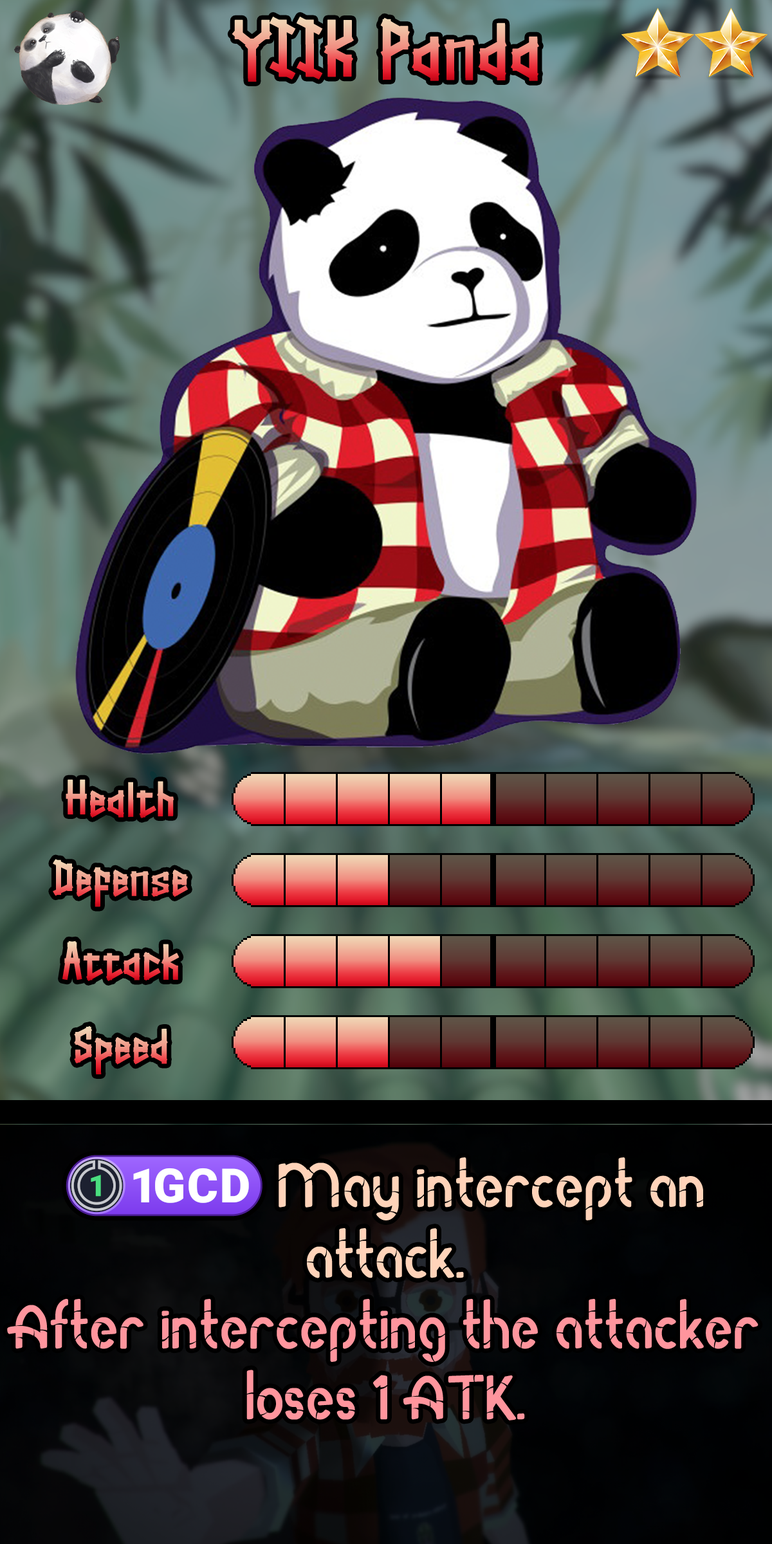
<style>
.page{position:relative;width:772px;height:1544px}
.page>*{position:absolute;margin:0}
.t1{font:152.5px "Straightwell"}
.t2{font:92.7px "Straightwell"}
.t3{font:106.8px/70.8px "RodaBamboo";color:#ff959d}
.t4{font:106.8px/70.8px "stoogedings-Regular";color:#ffd3b9}
.t5{font:106.8px/70.8px "RodaBamboo";color:#ffd3b9}
</style>
<div class="page">
<p class="t1" style="left:232px;top:16px;width:307px;height:66px">YIIK Panda</p>
<p class="t2" style="left:66px;top:779px;width:108px;height:39px">Health</p>
<p class="t2" style="left:53px;top:859px;width:135px;height:48px">Defense</p>
<p class="t2" style="left:62px;top:941px;width:118px;height:40px">Attack</p>
<p class="t2" style="left:74px;top:1026px;width:94px;height:49px">Speed</p>
<p class="t3" style="left:7px;top:1155px;width:752px;height:266px;text-align:center"><span class="t4">(1GCD)</span><span class="t5"> May intercept an attack. <br></span>After intercepting the attacker loses 1 ATK.</p>
</div>
